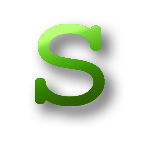
<style>
.page{position:relative;width:144px;height:144px;background:#ffffff}
.page>*{position:absolute;margin:0}
.t1{font:130px "CourierNewPSMT";font-weight:bold;scale:1.2 1}
</style>
<div class="page">
<p class="t1" style="left:35px;top:24px;width:70px;height:82px">S</p>
<p class="t1" style="left:35px;top:24px;width:70px;height:82px">S</p>
</div>
